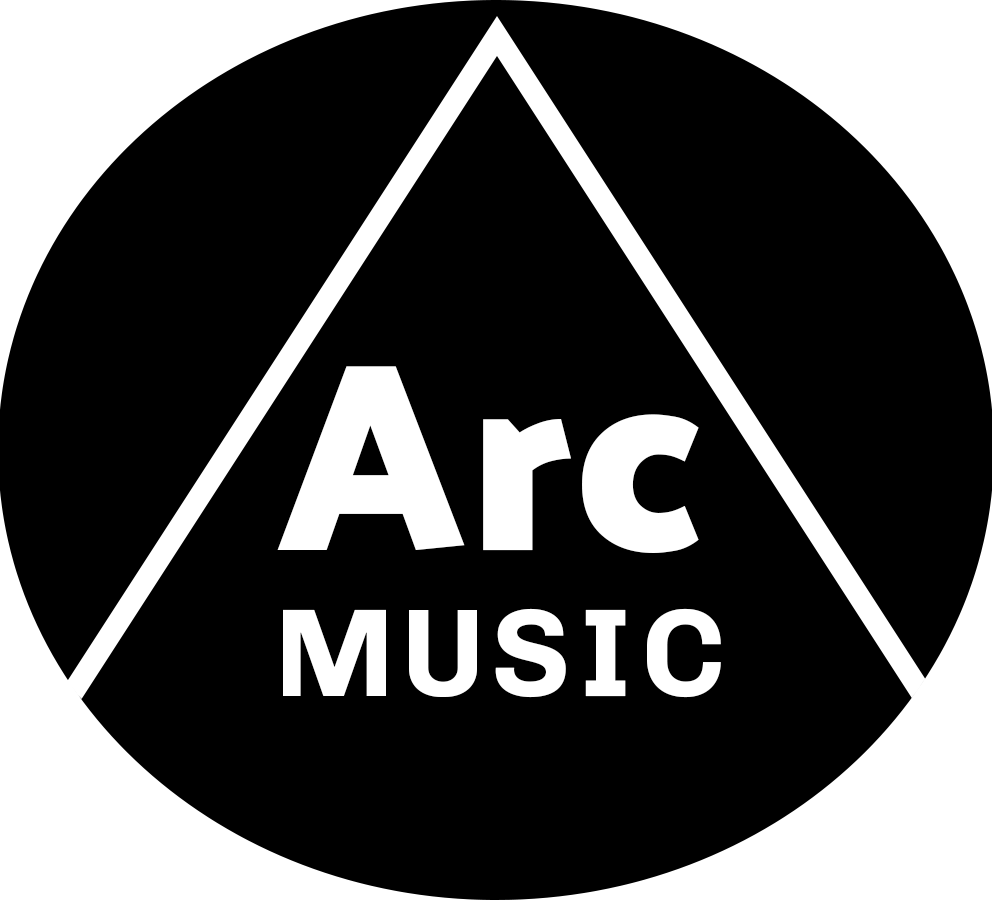
<style>
.page{position:relative;width:992px;height:900px;background:#000000}
.page>*{position:absolute;margin:0}
.t1{font:270px "PalanquinDark-Bold";color:#ffffff}
.t2{font:125px "Chivo-Bold";letter-spacing:0.05em;color:#ffffff}
</style>
<div class="page">
<p class="t1" style="left:277px;top:366px;width:422px;height:187px">Arc</p>
<p class="t2" style="left:283px;top:608px;width:438px;height:90px">MUSIC</p>
</div>
